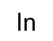
<style>
.page{position:relative;width:53px;height:41px;background:#ffffff}
.page>*{position:absolute;margin:0}
.t1{font:23.7px "DroidSans";color:#000000}
</style>
<div class="page">
<p class="t1" style="left:18px;top:12px;width:17px;height:19px">ln</p>
</div>
